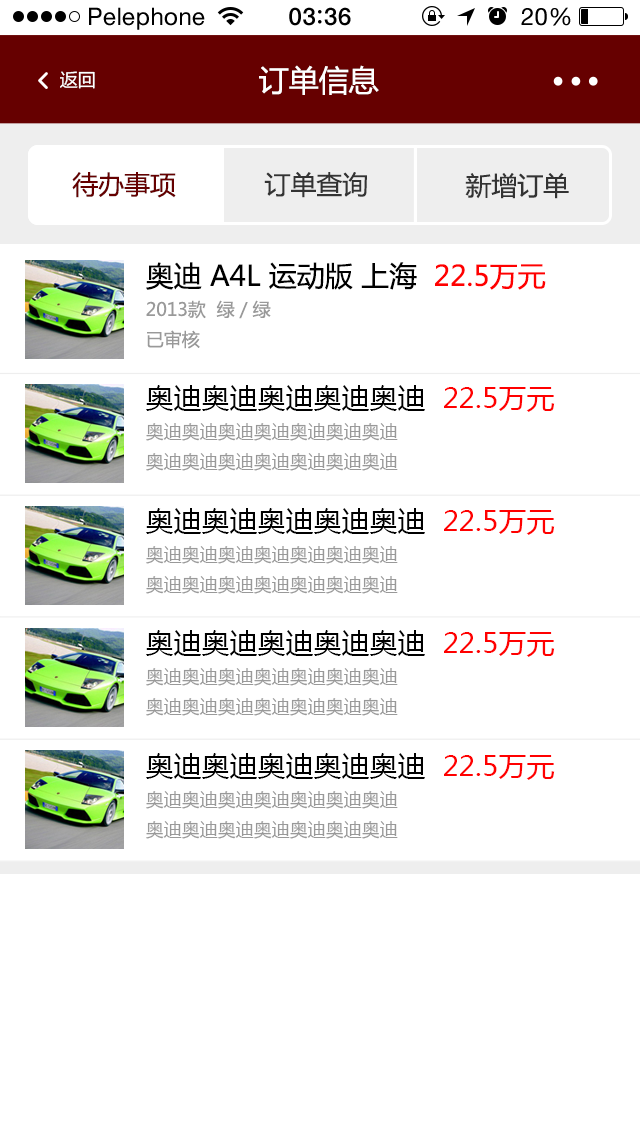
<style>
.page{position:relative;width:640px;height:1138px;background:#ffffff}
.page>*{position:absolute;margin:0}
.t1{font:24px "HelveticaNeue";letter-spacing:0.02em;color:#000000}
.t2{font:24px "HelveticaNeue-Medium";letter-spacing:0.03em;color:#000000}
.t3{font:29.9px "MicrosoftYaHei";color:#ffffff}
.t4{font:18px "MicrosoftYaHei";color:#ffffff}
.t5{font:25.8px "MicrosoftYaHei";color:#660000}
.t6{font:25.8px "MicrosoftYaHei";color:#333333}
.t7{font:18px/30px "MicrosoftYaHei";color:#999999}
.t8{font:28px/30px "MicrosoftYaHei";color:#000000}
.t9{font:28px/30px "MicrosoftYaHei";color:#ff0000}
</style>
<div class="page">
<p class="t1" style="left:89px;top:7px;width:116px;height:23px">Pelephone</p>
<p class="t2" style="left:289px;top:7px;width:62px;height:19px">03 36</p>
<p class="t1" style="left:521px;top:7px;width:50px;height:19px">20%</p>
<p class="t3" style="left:259px;top:65px;width:120px;height:30px">订单信息</p>
<p class="t4" style="left:60px;top:71px;width:35px;height:18px">返回</p>
<p class="t5" style="left:72px;top:172px;width:104px;height:26px">待办事项</p>
<p class="t6" style="left:264px;top:172px;width:103px;height:26px">订单查询</p>
<p class="t6" style="left:465px;top:173px;width:104px;height:26px">新增订单</p>
<p class="t7" style="left:146px;top:262px;width:400px;height:87px"><span class="t8">奥迪 A4L 运动版 上海  </span><span class="t9">22.5万元<br></span>2013款  绿／绿<br>已审核</p>
<p class="t7" style="left:146px;top:385px;width:409px;height:86px"><span class="t8">奥迪奥迪奥迪奥迪奥迪  </span><span class="t9">22.5万元<br></span>奥迪奥迪奥迪奥迪奥迪奥迪奥迪<br>奥迪奥迪奥迪奥迪奥迪奥迪奥迪</p>
<p class="t7" style="left:146px;top:508px;width:409px;height:86px"><span class="t8">奥迪奥迪奥迪奥迪奥迪  </span><span class="t9">22.5万元<br></span>奥迪奥迪奥迪奥迪奥迪奥迪奥迪<br>奥迪奥迪奥迪奥迪奥迪奥迪奥迪</p>
<p class="t7" style="left:146px;top:630px;width:409px;height:86px"><span class="t8">奥迪奥迪奥迪奥迪奥迪  </span><span class="t9">22.5万元<br></span>奥迪奥迪奥迪奥迪奥迪奥迪奥迪<br>奥迪奥迪奥迪奥迪奥迪奥迪奥迪</p>
<p class="t7" style="left:146px;top:753px;width:409px;height:86px"><span class="t8">奥迪奥迪奥迪奥迪奥迪  </span><span class="t9">22.5万元<br></span>奥迪奥迪奥迪奥迪奥迪奥迪奥迪<br>奥迪奥迪奥迪奥迪奥迪奥迪奥迪</p>
</div>
